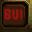
<style>
.page{position:relative;width:32px;height:32px}
.page>*{position:absolute;margin:0}
.t1{font:13.7px "28DaysLater";letter-spacing:0.08em;color:#9a1210;scale:0.96 1}
</style>
<div class="page">
<p class="t1" style="left:4px;top:8px;width:19px;height:12px">BUI</p>
</div>
